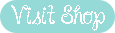
<style>
.page{position:relative;width:115px;height:33px;background:#96dad8}
.page>*{position:absolute;margin:0}
.t1{font:17.6px "JandaHappyDay";color:#fefcfc}
</style>
<div class="page">
<p class="t1" style="left:11px;top:5px;width:94px;height:26px">Visit Shop</p>
</div>
